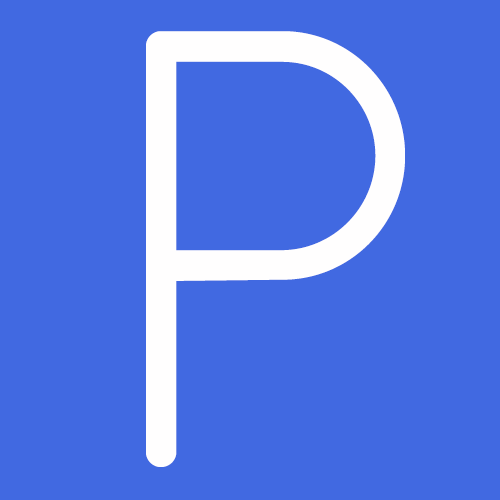
<style>
.page{position:relative;width:500px;height:500px;background:#4169e1}
.page>*{position:absolute;margin:0}
.t1{font:622.4px "QuicksandBook-Regular";color:#fffefe}
</style>
<div class="page">
<p class="t1" style="left:146px;top:31px;width:259px;height:436px">P</p>
</div>
